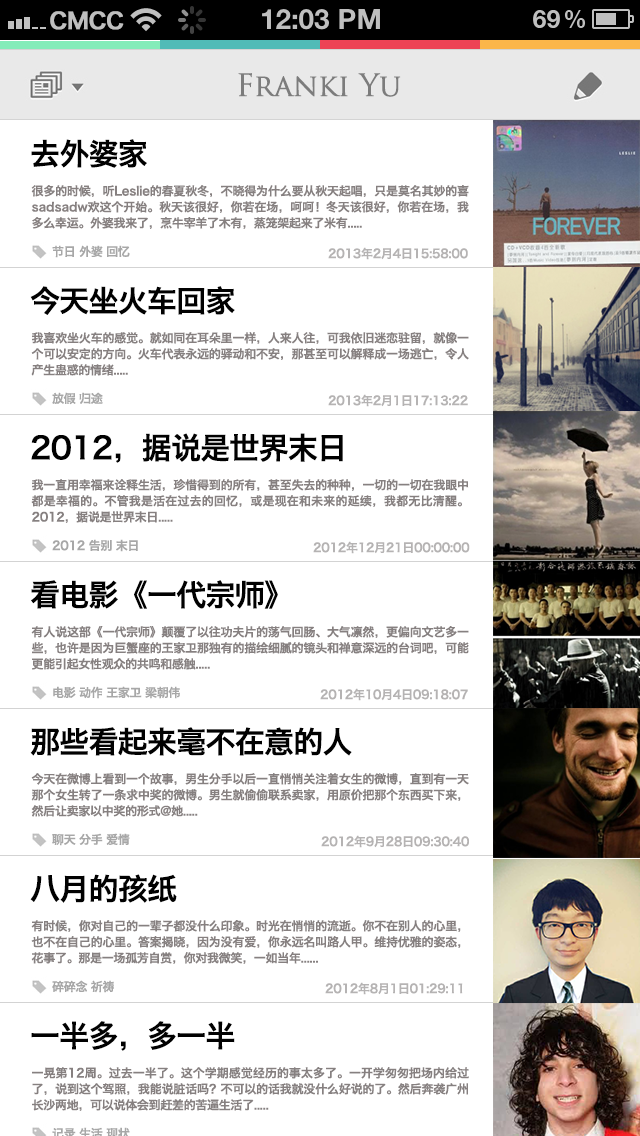
<style>
.page{position:relative;width:640px;height:1136px;background:#ffffff}
.page>*{position:absolute;margin:0}
.t1{font:22px "HiraginoSansGB-W6";letter-spacing:-0.025em;color:#bfbfbf;font-weight:bold}
.t2{font:30px "TrajanPro-Regular";letter-spacing:-0.025em;color:#7c7c7c;font-weight:bold}
.t3{font:30px "HiraginoSansGB-W6";letter-spacing:-0.025em;color:#010101}
.t4{font:12px/16px "HiraginoSansGB-W6";letter-spacing:-0.025em;color:#868080}
.t5{font:12px "HiraginoSansGB-W6";letter-spacing:-0.025em;color:#a7a7a7}
.t6{font:12px "HiraginoSansGB-W6";letter-spacing:-0.025em;color:#b5b3b3}
</style>
<div class="page">
<p class="t1" style="left:50px;top:11px;width:74px;height:19px">CMCC</p>
<p class="t2" style="left:238px;top:73px;width:163px;height:24px">Franki Yu</p>
<p class="t3" style="left:31px;top:139px;width:116px;height:29px">去外婆家</p>
<p class="t4" style="left:31px;top:185px;width:438px;height:44px;text-align:justify">很多的时候，听Leslie的春夏秋冬，不晓得为什么要从秋天起唱，只是莫名其妙的喜sadsadw欢这个开始。秋天该很好，你若在场，呵呵！冬天该很好，你若在场，我多么幸运。外婆我来了，烹牛宰羊了木有，蒸笼架起来了米有.....</p>
<p class="t5" style="left:52px;top:245px;width:78px;height:13px">节日 外婆 回忆</p>
<p class="t6" style="left:328px;top:247px;width:140px;height:13px">2013年2月4日15:58:00</p>
<p class="t3" style="left:30px;top:286px;width:205px;height:29px">今天坐火车回家</p>
<p class="t4" style="left:31px;top:332px;width:438px;height:44px;text-align:justify">我喜欢坐火车的感觉。就如同在耳朵里一样，人来人往，可我依旧迷恋驻留，就像一个可以安定的方向。火车代表永远的驿动和不安，那甚至可以解释成一场逃亡，令人产生蛊惑的情绪.....</p>
<p class="t5" style="left:52px;top:392px;width:51px;height:13px">放假 归途</p>
<p class="t6" style="left:328px;top:394px;width:140px;height:13px">2013年2月1日17:13:22</p>
<p class="t3" style="left:31px;top:433px;width:312px;height:30px">2012，据说是世界末日</p>
<p class="t4" style="left:31px;top:479px;width:438px;height:44px;text-align:justify">我一直用幸福来诠释生活，珍惜得到的所有，甚至失去的种种，一切的一切在我眼中都是幸福的。不管我是活在过去的回忆，或是现在和未来的延续，我都无比清醒。2012，据说是世界末日.....</p>
<p class="t5" style="left:52px;top:539px;width:86px;height:13px">2012 告别 末日</p>
<p class="t6" style="left:313px;top:541px;width:157px;height:13px">2012年12月21日00:00:00</p>
<p class="t3" style="left:31px;top:580px;width:247px;height:29px">看电影《一代宗师》</p>
<p class="t4" style="left:31px;top:626px;width:438px;height:44px;text-align:justify">有人说这部《一代宗师》颠覆了以往功夫片的荡气回肠、大气凛然，更偏向文艺多一些，也许是因为巨蟹座的王家卫那独有的描绘细腻的镜头和禅意深远的台词吧，可能更能引起女性观众的共鸣和感触.....</p>
<p class="t5" style="left:53px;top:686px;width:127px;height:13px">电影 动作 王家卫 梁朝伟</p>
<p class="t6" style="left:320px;top:688px;width:148px;height:13px">2012年10月4日09:18:07</p>
<p class="t3" style="left:30px;top:727px;width:322px;height:29px">那些看起来毫不在意的人</p>
<p class="t4" style="left:31px;top:773px;width:438px;height:44px;text-align:justify">今天在微博上看到一个故事，男生分手以后一直悄悄关注着女生的微博，直到有一天那个女生转了一条求中奖的微博。男生就偷偷联系卖家，用原价把那个东西买下来，然后让卖家以中奖的形式@她.....</p>
<p class="t5" style="left:52px;top:833px;width:78px;height:13px">聊天 分手 爱情</p>
<p class="t6" style="left:321px;top:835px;width:148px;height:13px">2012年9月28日09:30:40</p>
<p class="t3" style="left:30px;top:874px;width:147px;height:29px">八月的孩纸</p>
<p class="t4" style="left:31px;top:920px;width:430px;height:44px;text-align:justify">有时候，你对自己的一辈子都没什么印象。时光在悄悄的流逝。你不在别人的心里，也不在自己的心里。答案揭晓，因为没有爱，你永远名叫路人甲。维持优雅的姿态，花事了。那是一场孤芳自赏，你对我微笑，一如当年......</p>
<p class="t5" style="left:52px;top:980px;width:62px;height:13px">碎碎念 祈祷</p>
<p class="t6" style="left:325px;top:982px;width:138px;height:13px">2012年8月1日01:29:11</p>
<p class="t3" style="left:31px;top:1021px;width:204px;height:30px">一半多，多一半</p>
<p class="t4" style="left:32px;top:1067px;width:437px;height:44px;text-align:justify">一晃第12周。过去一半了。这个学期感觉经历的事太多了。一开学匆匆把场内给过了，说到这个驾照，我能说脏话吗？不可以的话我就没什么好说的了。然后奔袭广州长沙两地，可以说体会到赶差的苦逼生活了.....</p>
</div>
